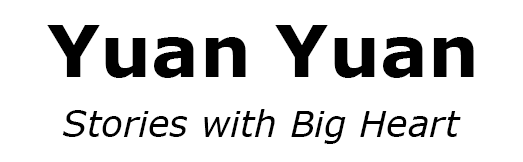
<style>
.page{position:relative;width:523px;height:162px;background:#ffffff}
.page>*{position:absolute;margin:0}
.t1{font:72px "Verdana-Bold";color:#000000}
.t2{font:36px "Verdana-Italic";color:#000000}
</style>
<div class="page">
<p class="t1" style="left:47px;top:25px;width:427px;height:53px">Yuan Yuan</p>
<p class="t2" style="left:62px;top:109px;width:399px;height:35px">Stories with Big Heart</p>
</div>
